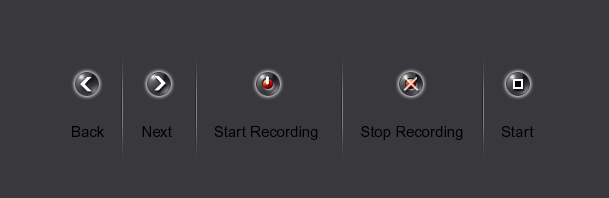
<style>
.page{position:relative;width:609px;height:198px;background:#39383d}
.page>*{position:absolute;margin:0}
.t1{font:15px "ArialMT";color:#000000}
</style>
<div class="page">
<p class="t1" style="left:72px;top:126px;width:462px;height:14px">Back         Next          Start Recording          Stop Recording         Start</p>
</div>
